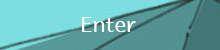
<style>
.page{position:relative;width:220px;height:50px;background:#7cdedf}
.page>*{position:absolute;margin:0}
.t1{font:22px "AndikaBasic";color:#ffffff}
</style>
<div class="page">
<p class="t1" style="left:82px;top:17px;width:54px;height:15px">Enter</p>
</div>
